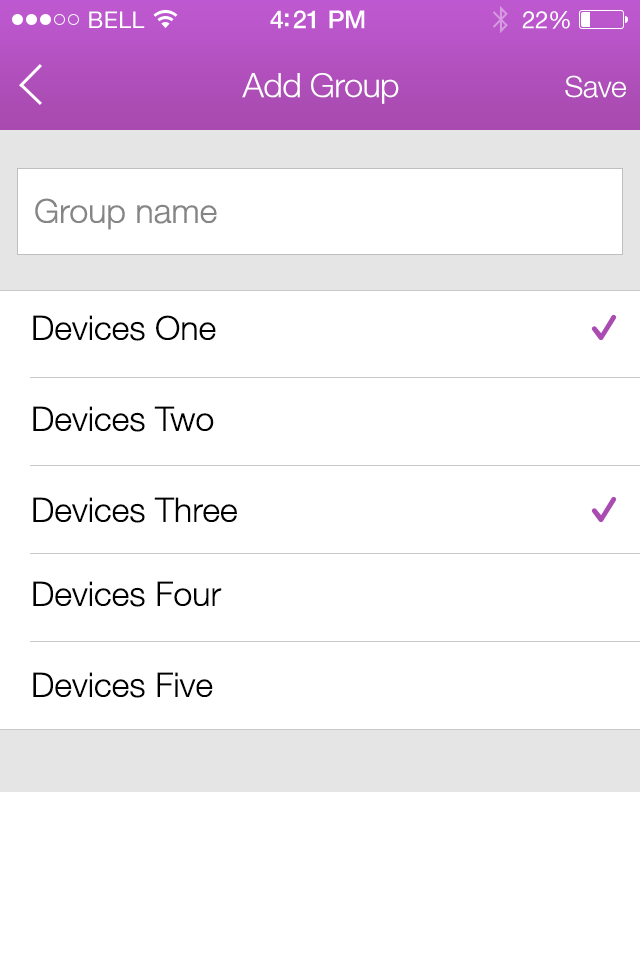
<style>
.page{position:relative;width:640px;height:960px;background:#ffffff}
.page>*{position:absolute;margin:0}
.t1{font:34px "HelveticaNeueLT-Light";letter-spacing:-0.02em;color:#ffffff}
.t2{font:30px "HelveticaNeueLT-Light";letter-spacing:-0.02em;color:#ffffff}
.t3{font:34px "HelveticaNeueLT-Light";color:#858585}
.t4{font:34px "HelveticaNeueLT-Light";color:#000000}
</style>
<div class="page">
<p class="t1" style="left:242px;top:73px;width:157px;height:31px">Add Group</p>
<p class="t2" style="left:565px;top:75px;width:61px;height:23px">Save</p>
<p class="t3" style="left:35px;top:198px;width:182px;height:32px">Group name</p>
<p class="t4" style="left:33px;top:315px;width:183px;height:26px">Devices One</p>
<p class="t4" style="left:33px;top:406px;width:181px;height:26px">Devices Two</p>
<p class="t4" style="left:33px;top:497px;width:204px;height:26px">Devices Three</p>
<p class="t4" style="left:33px;top:581px;width:189px;height:26px">Devices Four</p>
<p class="t4" style="left:33px;top:672px;width:180px;height:26px">Devices Five</p>
</div>
